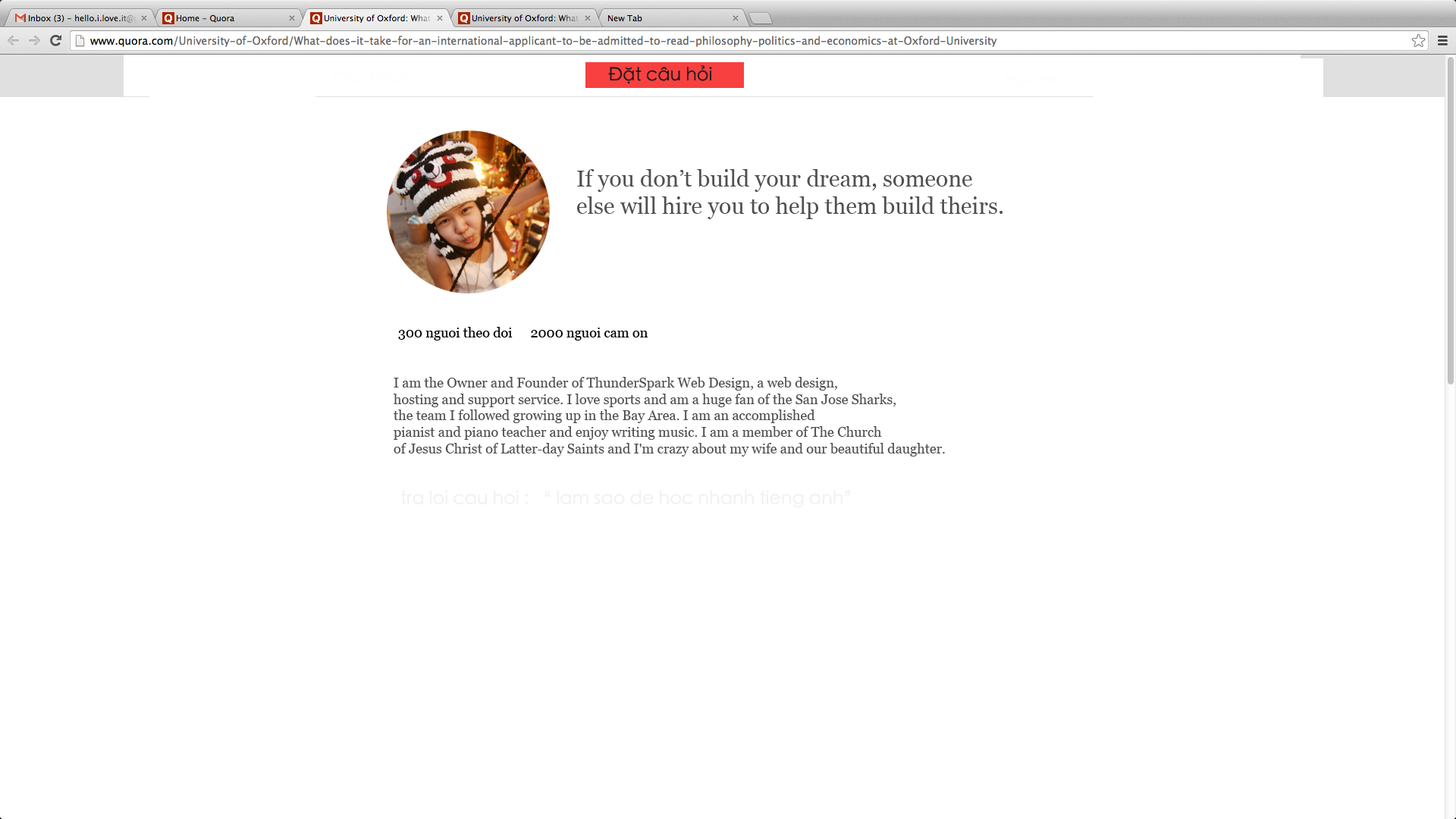
<style>
.page{position:relative;width:1456px;height:819px;background:#ffffff}
.page>*{position:absolute;margin:0}
.t1{font:18.2px "STHeitiTC-Light";color:#1e1c1c}
.t2{font:22.7px "Georgia";color:#524f4f}
.t3{font:13.6px "Georgia";color:#000000}
.t4{font:13.6px "Georgia";color:#524f4f}
.t5{font:18.2px "STHeitiTC-Light";color:#f4efef}
</style>
<div class="page">
<p class="t1" style="left:608px;top:65px;width:104px;height:19px">Đặt câu hỏi</p>
<p class="t2" style="left:577px;top:169px;width:426px;height:50px">If you don’t build your dream, someone<br>else will hire you to help them build theirs.</p>
<p class="t3" style="left:398px;top:327px;width:115px;height:13px">300 nguoi theo doi</p>
<p class="t3" style="left:531px;top:328px;width:117px;height:12px">2000 nguoi cam on</p>
<p class="t4" style="left:394px;top:377px;width:551px;height:80px">I am the Owner and Founder of ThunderSpark Web Design, a web design, <br>hosting and support service. I love sports and am a huge fan of the San Jose Sharks, <br>the team I followed growing up in the Bay Area. I am an accomplished <br>pianist and piano teacher and enjoy writing music. I am a member of The Church <br>of Jesus Christ of Latter-day Saints and I'm crazy about my wife and our beautiful daughter.</p>
<p class="t5" style="left:401px;top:490px;width:449px;height:18px">tra loi cau hoi : “ lam sao de hoc nhanh tieng anh”</p>
</div>
